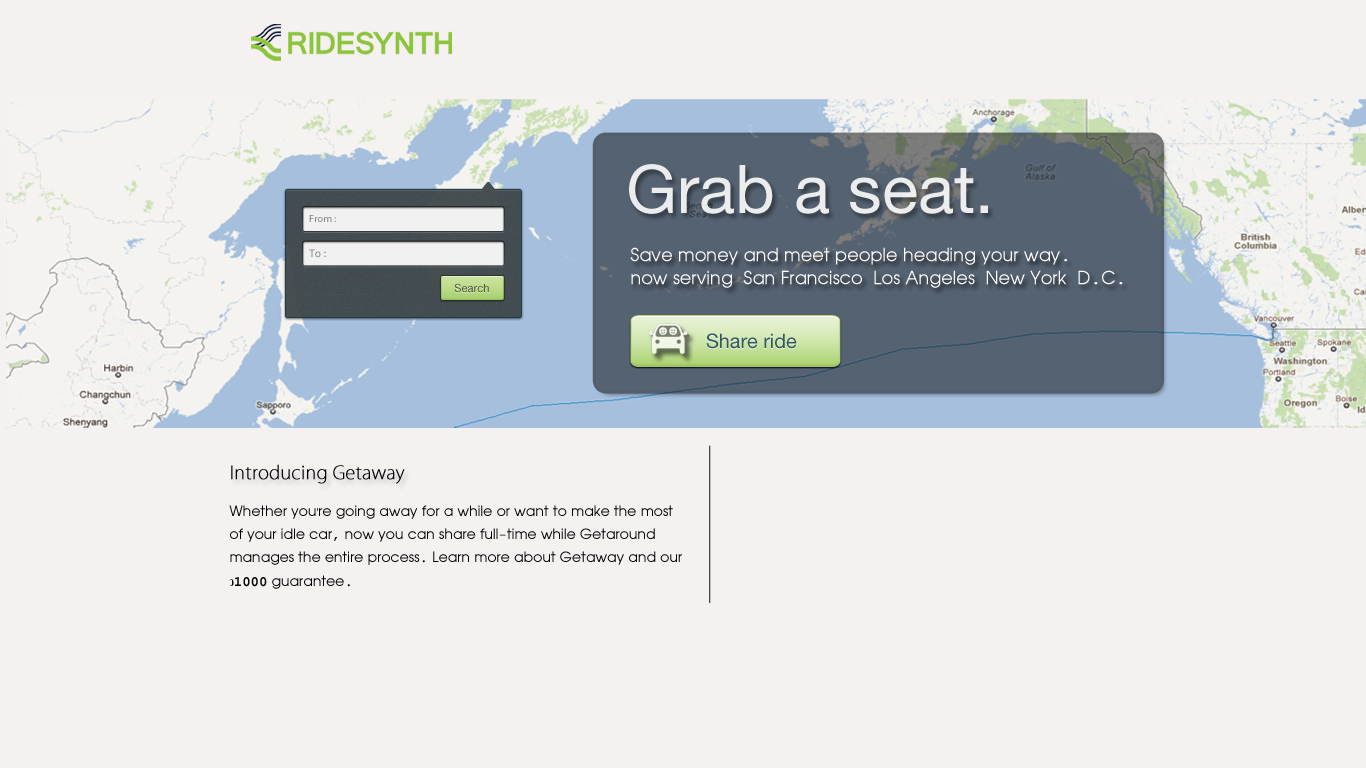
<style>
.page{position:relative;width:1366px;height:768px;background:#f5f1f1}
.page>*{position:absolute;margin:0}
.t1{font:67.1px "HelveticaNeue-Roman";color:#ffffff}
.t2{font:10.3px "MyriadPro-Regular";color:#7f7f7f}
.t3{font:10.3px "HelveticaNeue-Roman";color:#7f7f7f}
.t4{font:17.8px/22.2px "Madhura";color:#ffffff}
.t5{font:11.2px "HelveticaNeue-Roman";color:#48513a}
.t6{font:19.8px "HelveticaNeue-Roman";color:#335661}
.t7{font:18px "KozGoPr6N-ExtraLight";color:#000000;font-weight:bold}
.t8{font:10.8px "KozGoPr6N-ExtraLight";color:#000000;font-weight:bold}
.t9{font:14px/23.4px "Madhura";color:#000000}
</style>
<div class="page">
<p class="t1" style="left:629px;top:164px;width:359px;height:50px;opacity:0.88">Grab a seat.</p>
<p class="t2" style="left:309px;top:215px;width:27px;height:7px">From :</p>
<p class="t3" style="left:309px;top:249px;width:17px;height:9px">To :</p>
<p class="t4" style="left:630px;top:247px;width:493px;height:41px">Save money and meet people heading your way.<br>now serving  San Francisco  Los Angeles  New York  D.C.</p>
<p class="t5" style="left:454px;top:283px;width:35px;height:10px">Search</p>
<p class="t6" style="left:706px;top:333px;width:91px;height:16px">Share ride</p>
<p class="t7" style="left:231px;top:464px;width:174px;height:20px"><span class="t8"><br></span>Introducing Getaway</p>
<p class="t9" style="left:229px;top:505px;width:453px;height:84px">Whether you're going away for a while or want to make the most <br>of your idle car, now you can share full-time while Getaround <br>manages the entire process. Learn more about Getaway and our <br>$1000 guarantee.</p>
</div>
